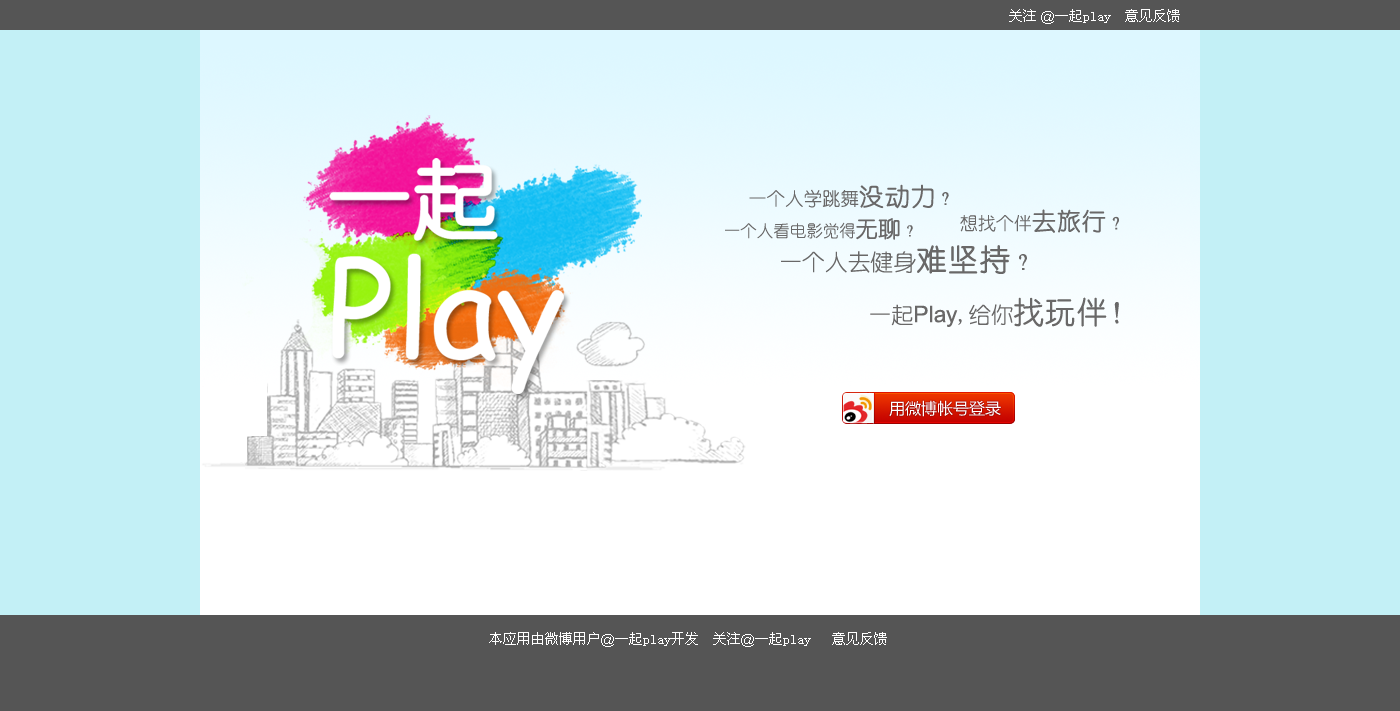
<style>
.page{position:relative;width:1400px;height:711px;background:#c3f0f6}
.page>*{position:absolute;margin:0}
.t1{font:14px "SimSun";color:#ffffff}
.t2{font:14px "ArialMT";color:#ffffff}
.t3{font:18.5px "YouYuan";color:#696868}
.t4{font:24.6px "YouYuan";color:#696868;font-weight:bold}
.t5{font:18px "YouYuan";color:#696868}
.t6{font:24px "YouYuan";color:#696868;font-weight:bold}
.t7{font:16.5px "YouYuan";color:#696868}
.t8{font:22px "YouYuan";color:#696868;font-weight:bold}
.t9{font:22.9px "YouYuan";color:#696868}
.t10{font:30.5px "YouYuan";color:#696868;font-weight:bold}
.t11{font:22.8px "ArialMT";color:#696868}
.t12{font:22.8px "YouYuan";color:#696868}
.t13{font:30.5px "YouYuan";color:#696868}
</style>
<div class="page">
<p class="t1" style="left:1009px;top:9px;width:171px;height:15px">关注<span class="t2"> @</span>一起play  意见反馈</p>
<p class="t3" style="left:749px;top:184px;width:200px;height:25px">一个人学跳舞<span class="t4">没动力</span>？</p>
<p class="t5" style="left:960px;top:209px;width:159px;height:24px">想找个伴<span class="t6">去旅行</span>？</p>
<p class="t7" style="left:725px;top:218px;width:188px;height:22px">一个人看电影觉得<span class="t8">无聊</span>？</p>
<p class="t9" style="left:781px;top:245px;width:246px;height:29px">一个人去健身<span class="t10">难坚持</span>？</p>
<p class="t11" style="left:870px;top:297px;width:249px;height:30px"><span class="t12">一起</span>Play<span class="t12">,给你</span><span class="t10">找玩伴</span><span class="t13">！</span></p>
<p class="t1" style="left:489px;top:632px;width:398px;height:15px">本应用由微博用户<span class="t2">@</span>一起play开发  关注<span class="t2">@</span>一起play   意见反馈</p>
</div>
